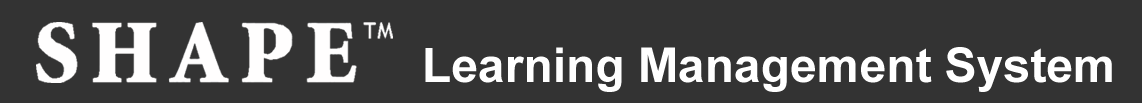
<style>
.page{position:relative;width:1142px;height:103px;background:#333333}
.page>*{position:absolute;margin:0}
.t1{font:48px "Arial-BoldMT";color:#ffffff}
</style>
<div class="page">
<p class="t1" style="left:425px;top:47px;width:687px;height:45px">Learning Management System</p>
</div>
